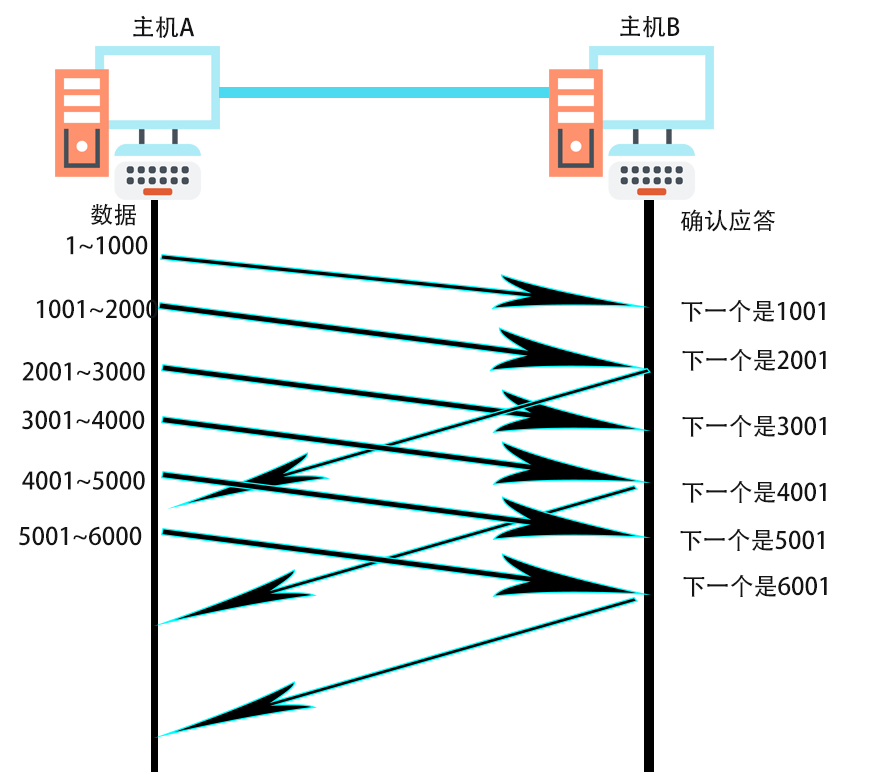
<style>
.page{position:relative;width:895px;height:772px;background:#ffffff}
.page>*{position:absolute;margin:0}
.t1{font:24px "AdobeHeitiStd-Regular";color:#151414}
</style>
<div class="page">
<p class="t1" style="left:133px;top:15px;width:62px;height:23px">主机A</p>
<p class="t1" style="left:620px;top:15px;width:60px;height:23px">主机B</p>
<p class="t1" style="left:90px;top:203px;width:46px;height:23px">数据</p>
<p class="t1" style="left:680px;top:209px;width:95px;height:23px">确认应答</p>
<p class="t1" style="left:66px;top:235px;width:82px;height:20px">1~1000</p>
<p class="t1" style="left:36px;top:299px;width:122px;height:20px">1001~2000</p>
<p class="t1" style="left:681px;top:299px;width:144px;height:23px">下一个是1001</p>
<p class="t1" style="left:682px;top:348px;width:144px;height:23px">下一个是2001</p>
<p class="t1" style="left:22px;top:362px;width:123px;height:19px">2001~3000</p>
<p class="t1" style="left:22px;top:410px;width:123px;height:20px">3001~4000</p>
<p class="t1" style="left:682px;top:414px;width:144px;height:23px">下一个是3001</p>
<p class="t1" style="left:22px;top:471px;width:123px;height:19px">4001~5000</p>
<p class="t1" style="left:682px;top:480px;width:144px;height:23px">下一个是4001</p>
<p class="t1" style="left:19px;top:526px;width:123px;height:20px">5001~6000</p>
<p class="t1" style="left:680px;top:528px;width:144px;height:23px">下一个是5001</p>
<p class="t1" style="left:683px;top:574px;width:144px;height:23px">下一个是6001</p>
</div>
